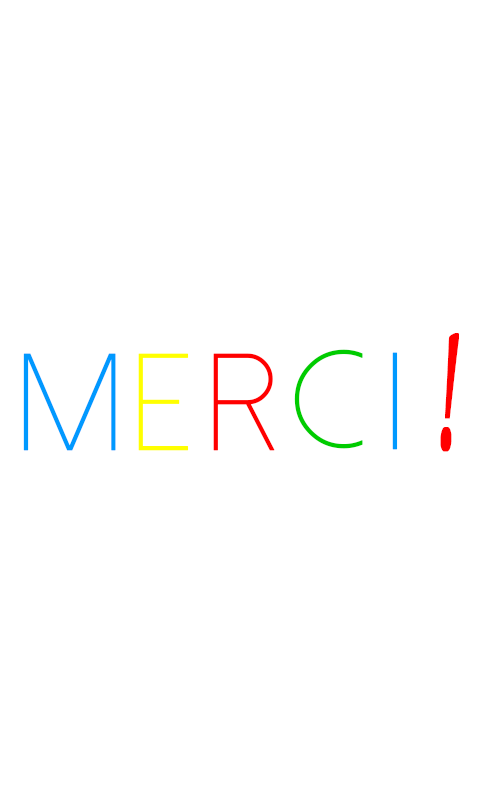
<style>
.page{position:relative;width:480px;height:800px;background:#ffffff}
.page>*{position:absolute;margin:0}
.t1{font:193.6px "MonotypeCorsiva";color:#ff0000;font-weight:bold;scale:0.45 1}
.t2{font:65.9px "DolceVitaLight";color:#0099ff;font-weight:bold}
.t3{font:65.9px "DolceVitaLight";color:#ffff00;font-weight:bold}
.t4{font:65.9px "DolceVitaLight";color:#ff0000;font-weight:bold}
.t5{font:65.9px "DolceVitaLight";color:#00cc00;font-weight:bold}
</style>
<div class="page">
<p class="t1" style="left:440px;top:333px;width:19px;height:119px">!</p>
<p class="t2" style="left:23px;top:353px;width:93px;height:98px">M</p>
<p class="t3" style="left:138px;top:353px;width:51px;height:98px">e</p>
<p class="t4" style="left:213px;top:353px;width:62px;height:98px">r</p>
<p class="t5" style="left:294px;top:349px;width:69px;height:100px">c</p>
<p class="t2" style="left:392px;top:352px;width:6px;height:98px">i</p>
</div>
